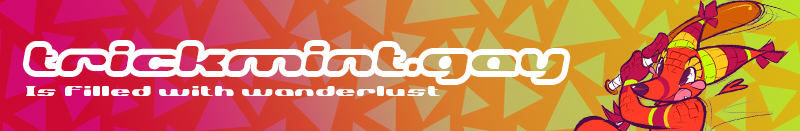
<style>
.page{position:relative;width:800px;height:131px}
.page>*{position:absolute;margin:0}
.t1{font:55px "FOTGlaucrie";font-style:italic}
.t2{font:23px "FOTGlaucrie";color:#ffffff}
</style>
<div class="page">
<p class="t1" style="left:28px;top:46px;width:537px;height:33px">trickmint.gay</p>
<p class="t2" style="left:26px;top:86px;width:414px;height:10px">Is filled with wanderlust</p>
</div>
